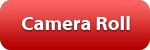
<style>
.page{position:relative;width:150px;height:50px}
.page>*{position:absolute;margin:0}
.t1{font:20px "MyriadWebPro-Bold";color:#ffffff}
</style>
<div class="page">
<p class="t1" style="left:22px;top:16px;width:108px;height:14px">Camera Roll</p>
</div>
